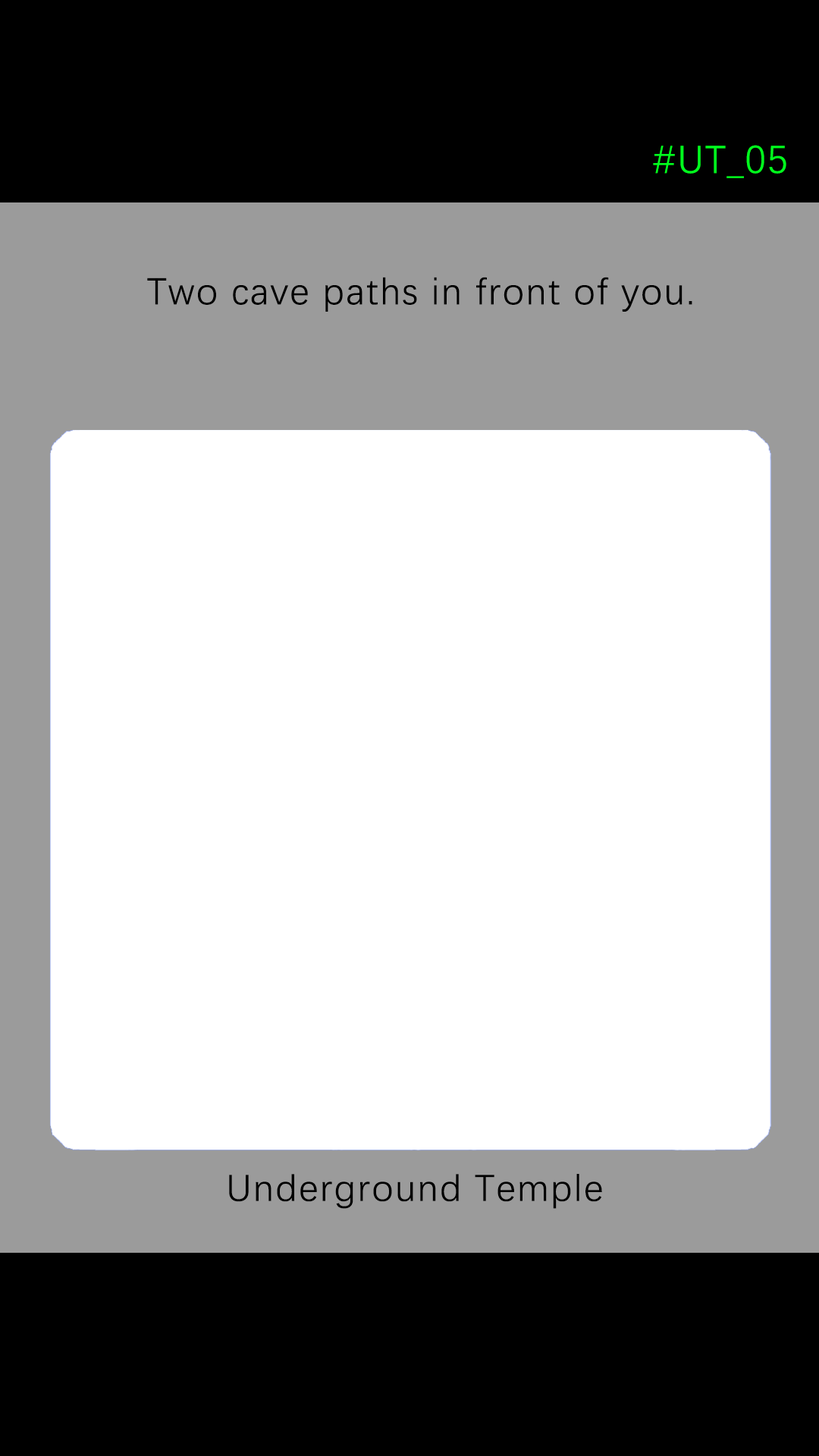
<style>
.page{position:relative;width:819px;height:1456px;background:#ffffff}
.page>*{position:absolute;margin:0}
.t1{font:39.2px "DengXian-Regular";letter-spacing:0.04em;color:#00ff1e}
.t2{font:37.9px "DengXian-Regular";letter-spacing:0.04em;color:#000000}
</style>
<div class="page">
<p class="t1" style="left:653px;top:145px;width:133px;height:33px">#UT_05</p>
<p class="t2" style="left:147px;top:277px;width:545px;height:35px">Two cave paths in front of you.</p>
<p class="t2" style="left:229px;top:1174px;width:373px;height:35px">Underground Temple</p>
</div>
